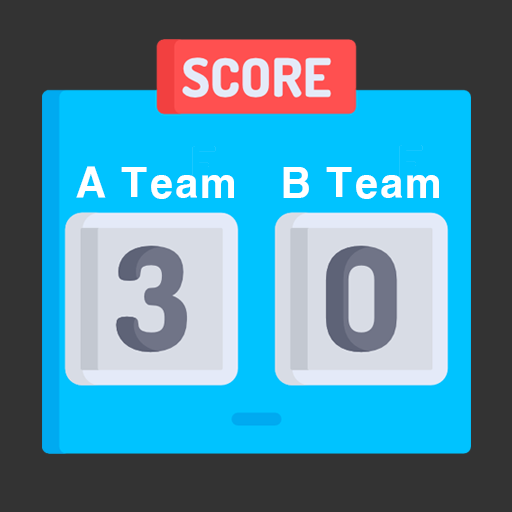
<style>
.page{position:relative;width:512px;height:512px;background:#333333}
.page>*{position:absolute;margin:0}
.t1{font:40px "H2gtrE";color:#ffffff}
</style>
<div class="page">
<p class="t1" style="left:76px;top:166px;width:158px;height:33px">A Team</p>
<p class="t1" style="left:283px;top:167px;width:156px;height:32px">B Team</p>
</div>
